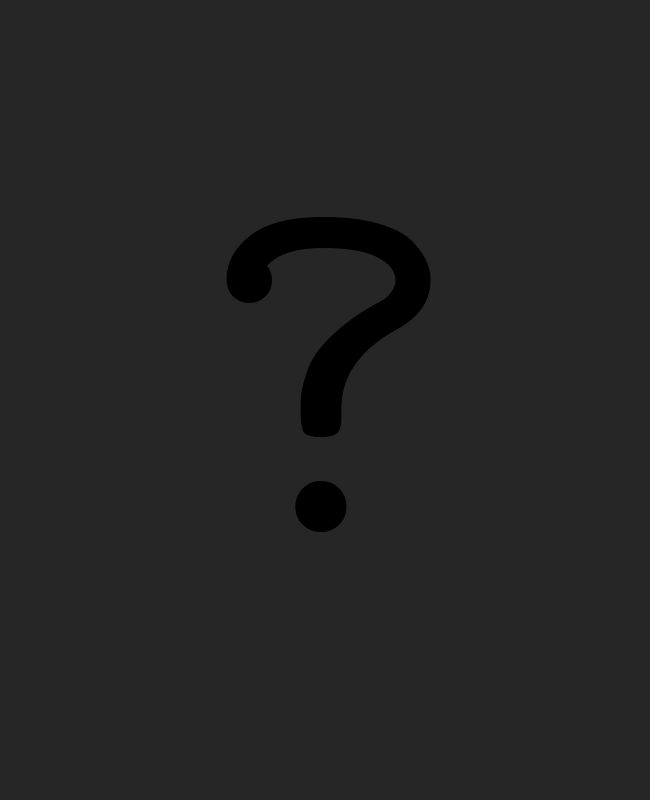
<style>
.page{position:relative;width:650px;height:800px;background:#262626}
.page>*{position:absolute;margin:0}
.t1{font:509.7px "CMUTypewriter-Regular";color:#000000}
</style>
<div class="page">
<p class="t1" style="left:226px;top:216px;width:205px;height:316px">?</p>
</div>
